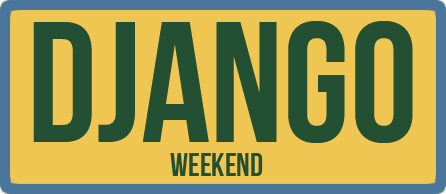
<style>
.page{position:relative;width:446px;height:194px;background:#f0c653}
.page>*{position:absolute;margin:0}
.t1{font:171px "BebasNeue";color:#234f32}
.t2{font:32px "BebasNeue";color:#234f32}
</style>
<div class="page">
<p class="t1" style="left:33px;top:21px;width:380px;height:122px">Django</p>
<p class="t2" style="left:170px;top:153px;width:93px;height:23px">weekend</p>
</div>
